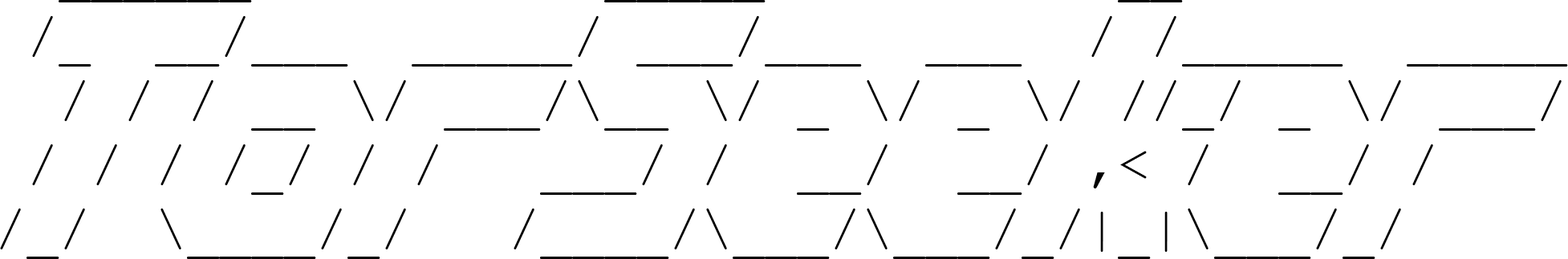
<style>
.page{position:relative;width:1568px;height:259px;background:#ffffff}
.page>*{position:absolute;margin:0}
.t1{font:53.5px "CourierNewPSMT";color:#000000}
</style>
<div class="page">
<p class="t1" style="left:0px;top:0px;width:1568px;height:259px">______           _____           __            <br> /_  __/___  _____/ ___/___  ___  / /_____  _____<br>  / / / __ \/ ___/\__ \/ _ \/ _ \/ //_/ _ \/ ___/<br> / / / /_/ / /   ___/ /  __/  __/ ,&lt; /  __/ /    <br>/_/  \____/_/   /____/\___/\___/_/|_|\___/_/</p>
</div>
